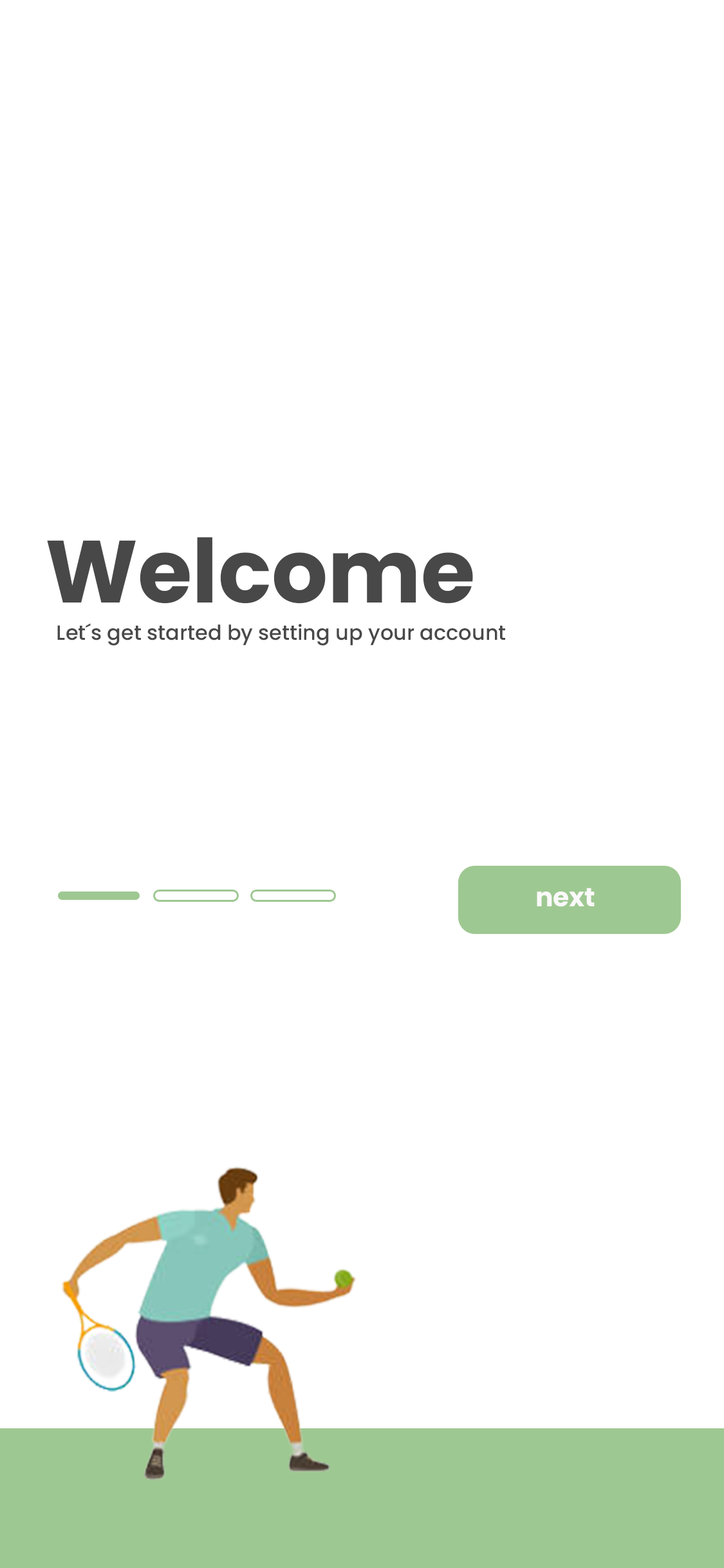
<style>
.page{position:relative;width:724px;height:1568px;background:#ffffff}
.page>*{position:absolute;margin:0}
.t1{font:88.2px "Poppins-Bold";color:#484848}
.t2{font:20.6px "Poppins-Medium";color:#484848}
.t3{font:26.2px "Poppins-Bold";color:#faf9f9}
</style>
<div class="page">
<p class="t1" style="left:47px;top:537px;width:426px;height:67px">Welcome</p>
<p class="t2" style="left:57px;top:623px;width:448px;height:23px">Let´s get started by setting up your account</p>
<p class="t3" style="left:537px;top:888px;width:58px;height:19px">next</p>
</div>
